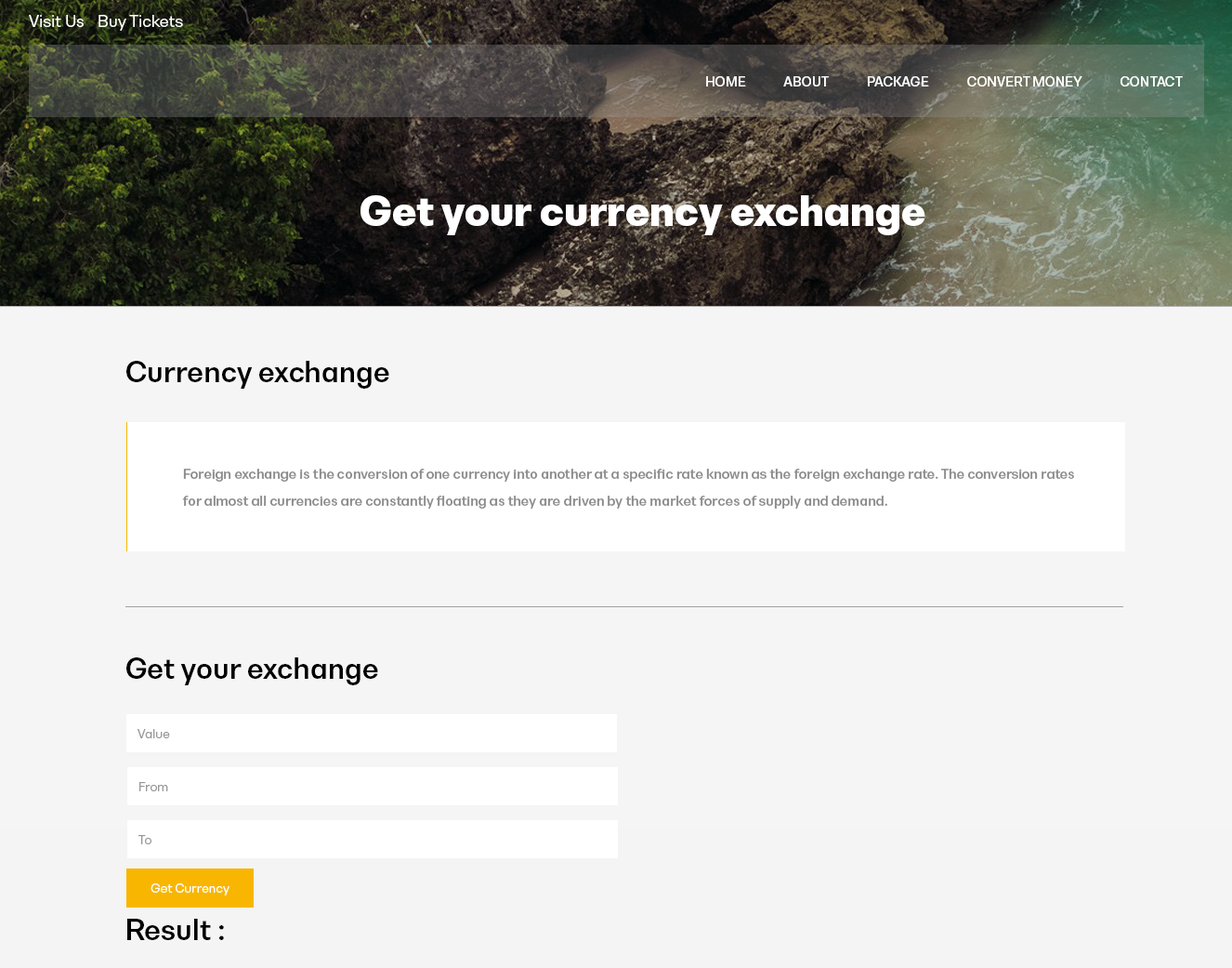
<style>
.page{position:relative;width:1232px;height:968px;background:#f5f5f5}
.page>*{position:absolute;margin:0}
.t1{font:15.5px "BwNistaGeometricDEMO-Regular";color:#ffffff}
.t2{font:12.4px "BwNistaGeometricDEMO-Bold";color:#ffffff}
.t3{font:38.7px "BwNistaGeometricDEMO-Black";color:#ffffff}
.t4{font:27.1px "BwNistaGeometricDEMO-Bold";color:#000000}
.t5{font:12.8px/27.1px "BwNistaGeometricDEMO-Bold";color:#8d8d8d}
.t6{font:12px "BwNistaGeometricDEMO-Regular";color:#989898}
.t7{font:12px "BwNistaGeometricDEMO-Regular";color:#ffffff}
</style>
<div class="page">
<p class="t1" style="left:29px;top:15px;width:55px;height:12px">Visit Us</p>
<p class="t1" style="left:99px;top:15px;width:84px;height:16px">Buy Tickets</p>
<p class="t2" style="left:706px;top:76px;width:477px;height:10px">HOME             ABOUT             PACKAGE             CONVERT MONEY             CONTACT</p>
<p class="t3" style="left:361px;top:195px;width:565px;height:40px">Get your currency exchange</p>
<p class="t4" style="left:126px;top:361px;width:263px;height:28px">Currency exchange</p>
<p class="t5" style="left:182px;top:468px;width:892px;height:40px">Foreign exchange is the conversion of one currency into another at a specific rate known as the foreign exchange rate. The conversion rates for almost all currencies are constantly floating as they are driven by the market forces of supply and demand.</p>
<p class="t4" style="left:126px;top:657px;width:252px;height:28px">Get your exchange</p>
<p class="t6" style="left:138px;top:729px;width:32px;height:9px">Value</p>
<p class="t6" style="left:139px;top:782px;width:29px;height:9px">From</p>
<p class="t6" style="left:138px;top:835px;width:13px;height:9px">To</p>
<p class="t7" style="left:151px;top:883px;width:79px;height:12px">Get Currency</p>
<p class="t4" style="left:127px;top:918px;width:97px;height:22px">Result :</p>
</div>
